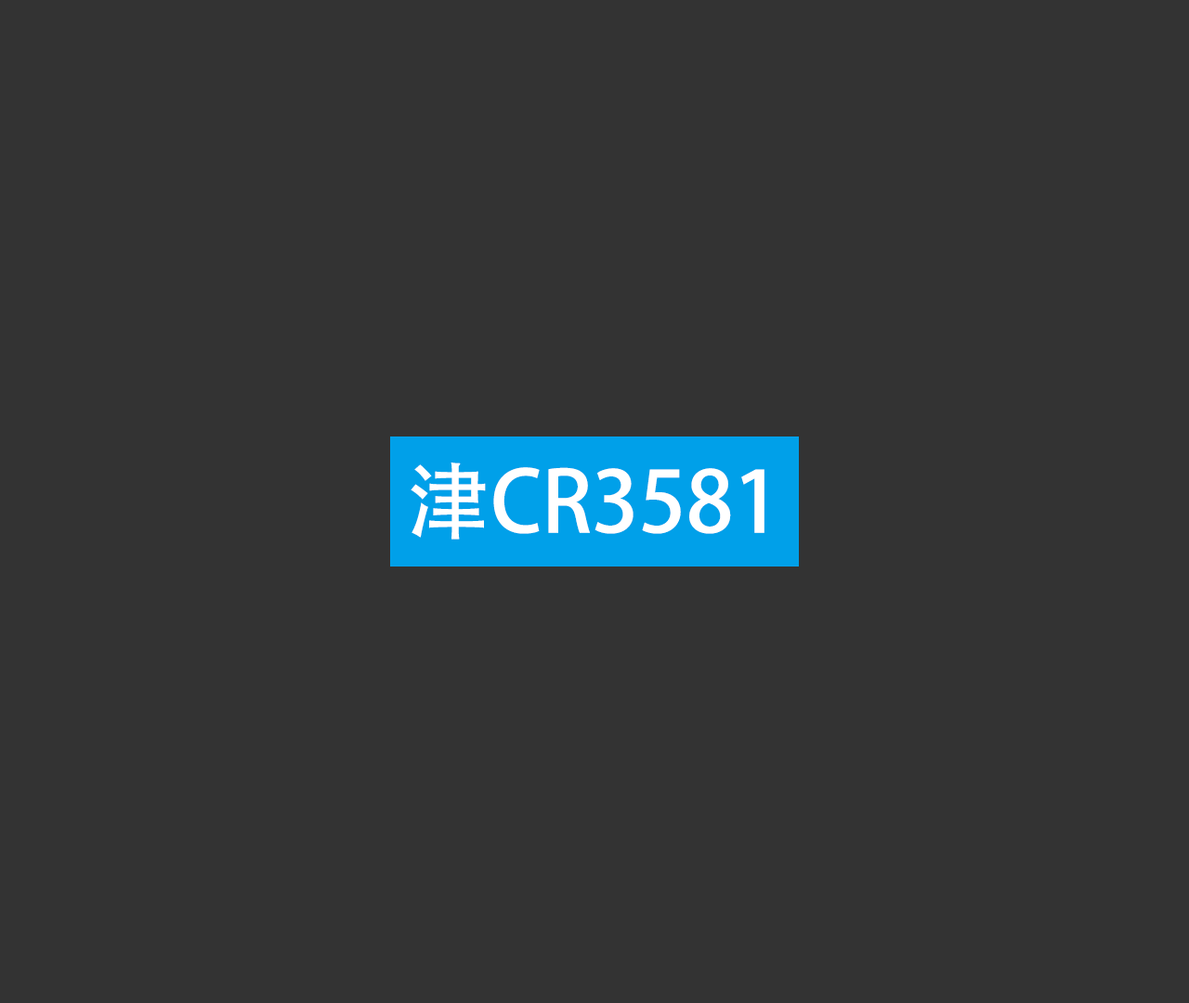
<style>
.page{position:relative;width:1189px;height:1003px;background:#333333}
.page>*{position:absolute;margin:0}
.t1{font:83.8px "AdobeHeitiStd-Regular";color:#ffffff}
</style>
<div class="page">
<p class="t1" style="left:411px;top:463px;width:353px;height:77px">津CR3581</p>
</div>
